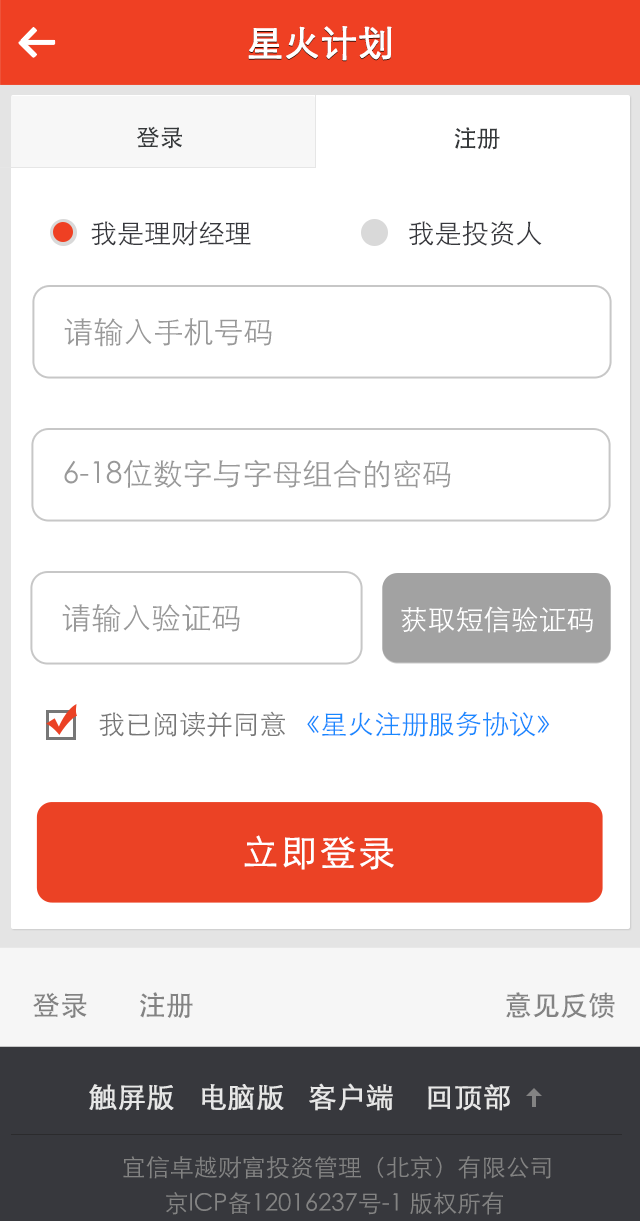
<style>
.page{position:relative;width:640px;height:1221px;background:#ffffff}
.page>*{position:absolute;margin:0}
.t1{font:36px "STXihei";color:#ffffff;font-weight:bold}
.t2{font:24px "STHeiti";letter-spacing:-0.02em;color:#36393b}
.t3{font:27px "STXihei";color:#37383d}
.t4{font:30.2px "STXihei";color:#999999}
.t5{font:28px "STXihei";color:#ffffff}
.t6{font:27px "STXihei";color:#1788ff}
.t7{font:27px "STXihei";color:#777777}
.t8{font:36px "STXihei";letter-spacing:0.05em;color:#ffffff;font-weight:bold}
.t9{font:28px "AdobeHeitiStd-Regular";color:#838383}
.t10{font:28px "STXihei";color:#e7e7e7;font-weight:bold}
.t11{font:24px/36px "STXihei";color:#838383}
</style>
<div class="page">
<p class="t1" style="left:248px;top:26px;width:144px;height:35px">星火计划</p>
<p class="t2" style="left:137px;top:126px;width:45px;height:23px">登录</p>
<p class="t2" style="left:454px;top:127px;width:46px;height:23px">注册</p>
<p class="t3" style="left:91px;top:221px;width:160px;height:25px">我是理财经理</p>
<p class="t3" style="left:409px;top:221px;width:133px;height:25px">我是投资人</p>
<p class="t4" style="left:64px;top:318px;width:208px;height:29px">请输入手机号码</p>
<p class="t4" style="left:64px;top:459px;width:387px;height:29px">6-18位数字与字母组合的密码</p>
<p class="t4" style="left:62px;top:604px;width:178px;height:29px">请输入验证码</p>
<p class="t5" style="left:401px;top:606px;width:192px;height:27px">获取短信验证码</p>
<p class="t6" style="left:99px;top:711px;width:451px;height:26px"><span class="t7">我已阅读并同意 </span>《星火注册服务协议》</p>
<p class="t8" style="left:244px;top:835px;width:150px;height:35px">立即登录</p>
<p class="t9" style="left:33px;top:992px;width:160px;height:26px">登录        注册</p>
<p class="t9" style="left:506px;top:992px;width:109px;height:27px">意见反馈</p>
<p class="t10" style="left:89px;top:1083px;width:421px;height:28px">触屏版   电脑版   客户端    回顶部</p>
<p class="t11" style="left:123px;top:1156px;width:428px;height:59px;text-align:center">宜信卓越财富投资管理（北京）有限公司<br>京ICP备12016237号-1 版权所有</p>
</div>
